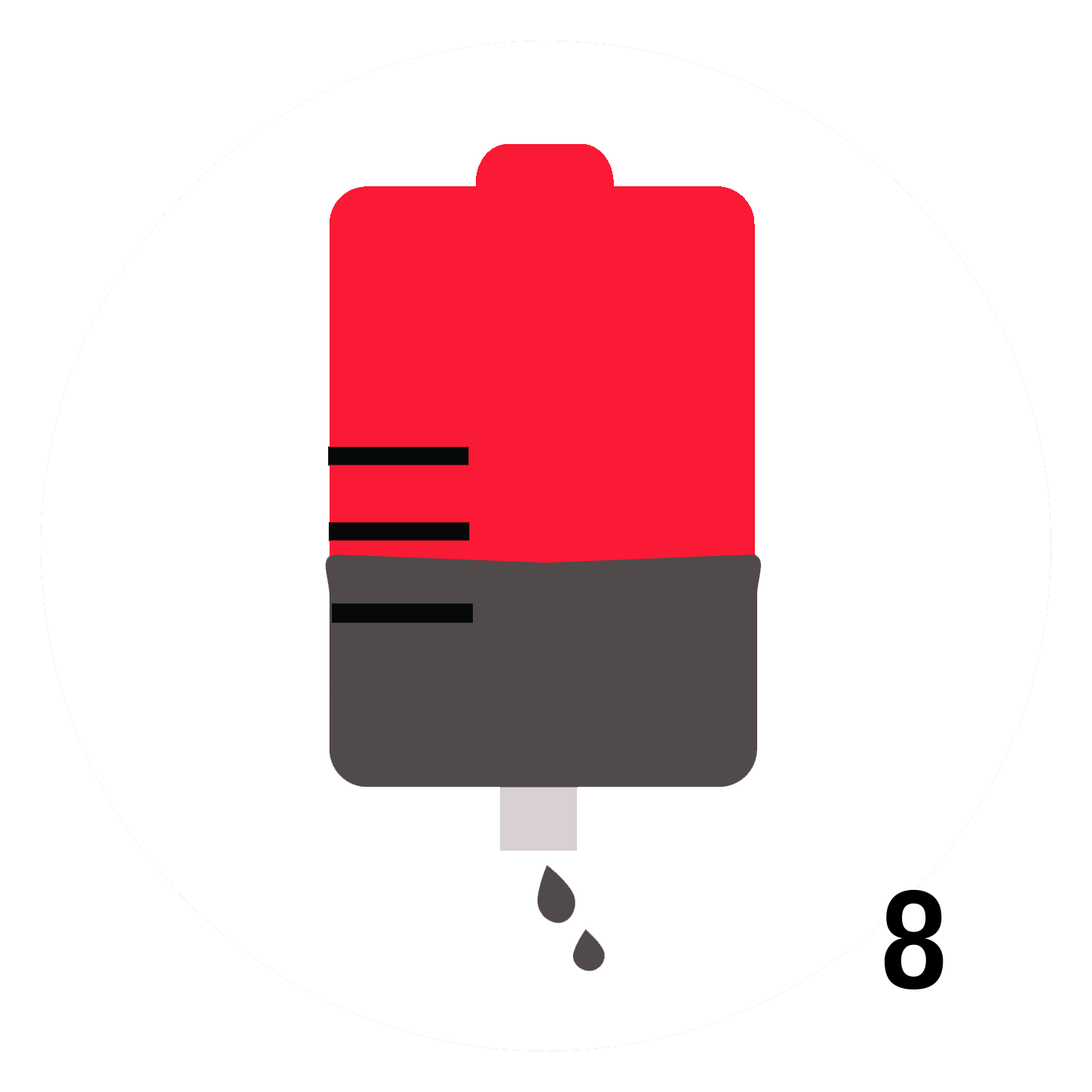
<style>
.page{position:relative;width:1092px;height:1092px;background:#ffffff}
.page>*{position:absolute;margin:0}
.t1{font:220px "DilleniaUPCBold";color:#000000}
</style>
<div class="page">
<p class="t1" style="left:884px;top:890px;width:59px;height:99px">8</p>
</div>
